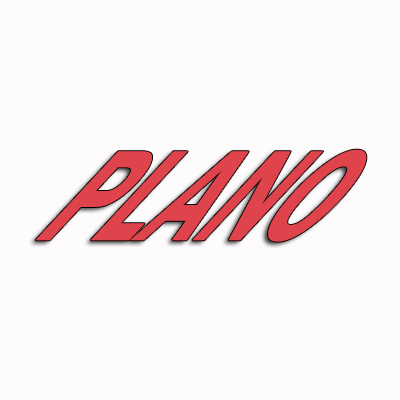
<style>
.page{position:relative;width:400px;height:400px;background:#fdfbfc}
.page>*{position:absolute;margin:0}
.t1{font:172.1px "FranklinGothic-DemiItalic";color:#df444c;scale:0.53 1}
</style>
<div class="page">
<p class="t1" style="left:35px;top:149px;width:332px;height:93px">PLANO</p>
</div>
